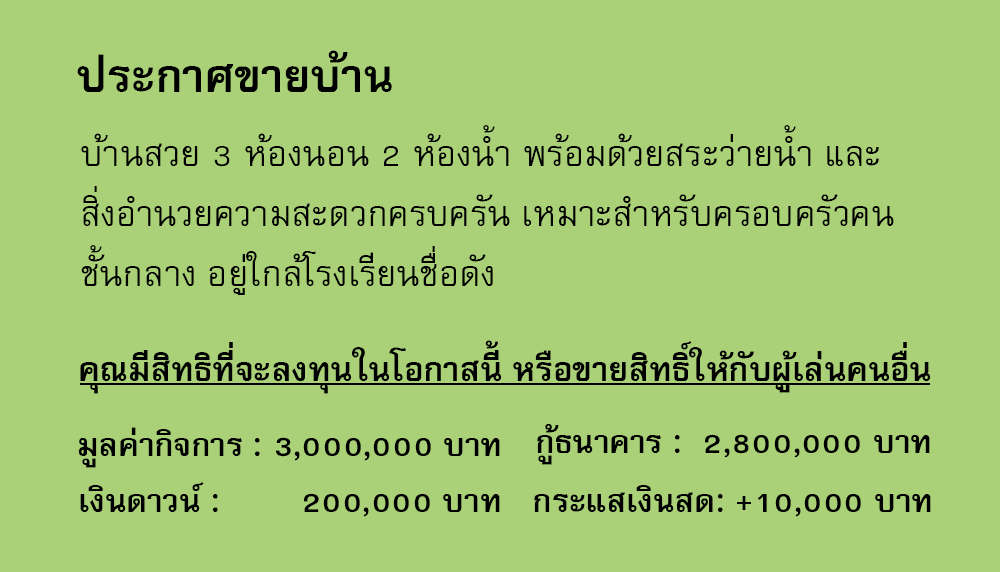
<style>
.page{position:relative;width:1000px;height:572px;background:#aad178}
.page>*{position:absolute;margin:0}
.t1{font:64px "FreesiaUPCBold";color:#000000}
.t2{font:50px/60px "FreesiaUPC";color:#000000}
.t3{font:47px "FreesiaUPCBold";color:#000000}
.t4{font:45px "FreesiaUPCBold";color:#000000}
</style>
<div class="page">
<p class="t1" style="left:77px;top:50px;width:315px;height:42px">ประกาศขายบ้าน</p>
<p class="t2" style="left:81px;top:125px;width:813px;height:170px">บ้านสวย 3 ห้องนอน 2 ห้องน้ำ พร้อมด้วยสระว่ายน้ำ และ<br>สิ่งอำนวยความสะดวกครบครัน เหมาะสำหรับครอบครัวคน<br>ชั้นกลาง อยู่ใกล้โรงเรียนชื่อดัง</p>
<p class="t3" style="left:80px;top:340px;width:851px;height:54px">คุณมีสิทธิที่จะลงทุนในโอกาสนี้ หรือขายสิทธิ์ให้กับผู้เล่นคนอื่น</p>
<p class="t4" style="left:537px;top:424px;width:393px;height:41px">กู้ธนาคาร :  2,800,000 บาท</p>
<p class="t4" style="left:78px;top:427px;width:422px;height:41px">มูลค่ากิจการ : 3,000,000 บาท</p>
<p class="t4" style="left:80px;top:481px;width:420px;height:36px">เงินดาวน์ :        200,000 บาท</p>
<p class="t4" style="left:534px;top:485px;width:397px;height:32px">กระแสเงินสด: +10,000 บาท</p>
</div>
